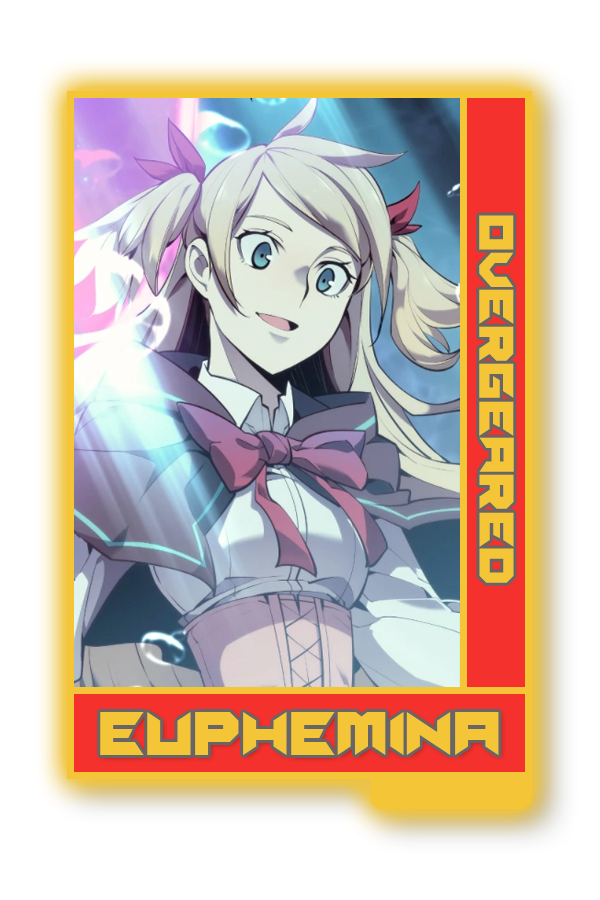
<style>
.page{position:relative;width:600px;height:900px;background:#ffffff}
.page>*{position:absolute;margin:0}
.t1{font:48.8px "Suggested-Regular";color:#f4c536}
.t2{font:62.5px "Suggested-Regular";color:#f4c536}
</style>
<div class="page">
<p class="t1" style="left:479px;top:215px;width:35px;height:368px;rotate:90deg">OVERGEARED</p>
<p class="t2" style="left:100px;top:712px;width:399px;height:43px">EUPHEMINA</p>
</div>
